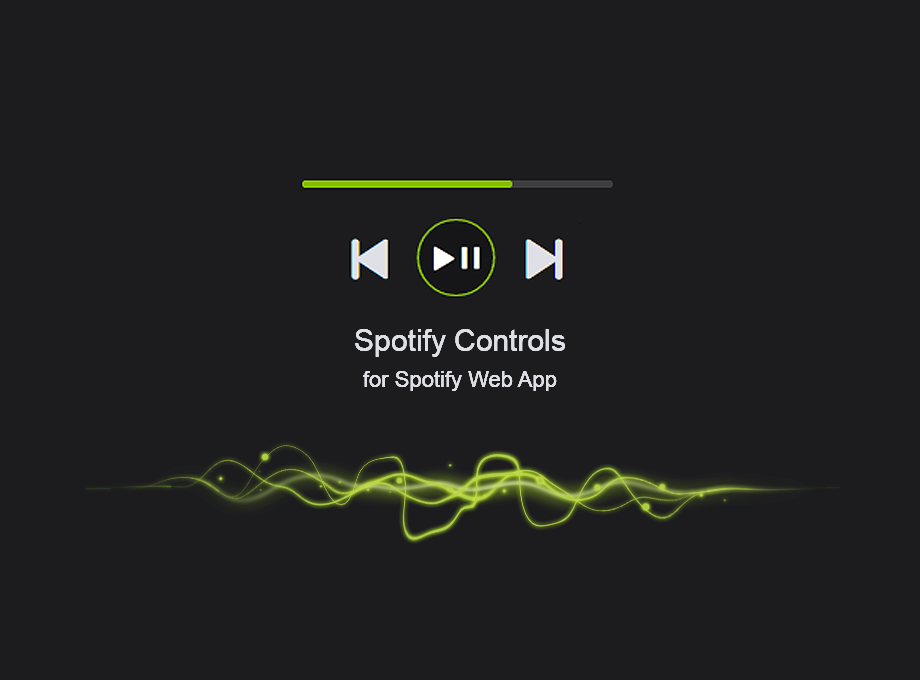
<style>
.page{position:relative;width:920px;height:680px;background:#1c1c1f}
.page>*{position:absolute;margin:0}
.t1{font:22px "ArialMT";color:#dfe0e6}
.t2{font:30px "ArialMT";color:#dfe0e6}
</style>
<div class="page">
<p class="t1" style="left:355px;top:329px;width:210px;height:62px;text-align:center"><span class="t2">Spotify Controls<br> <br></span>for Spotify Web App</p>
<p class="t1" style="left:355px;top:329px;width:210px;height:62px;text-align:center"><span class="t2">Spotify Controls<br> <br></span>for Spotify Web App</p>
<p class="t1" style="left:355px;top:329px;width:210px;height:62px;text-align:center"><span class="t2">Spotify Controls<br> <br></span>for Spotify Web App</p>
</div>
